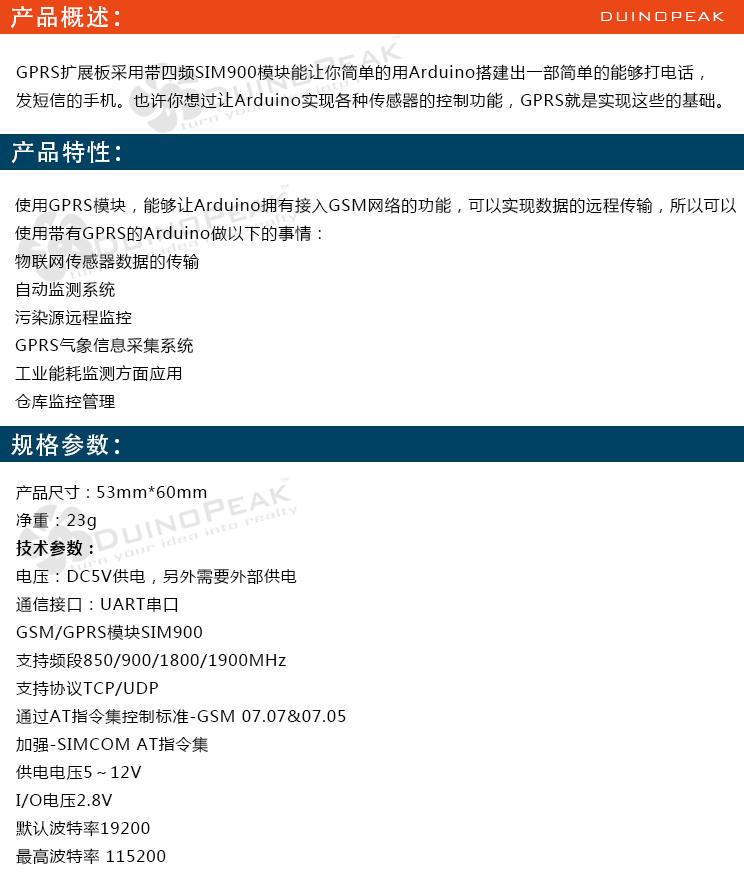
<style>
.page{position:relative;width:744px;height:880px;background:#ffffff}
.page>*{position:absolute;margin:0}
.t1{font:24px "AdobeHeitiStd-Regular";letter-spacing:0.05em;color:#ffffff}
.t2{font:18px "BankGothicBT-Light";letter-spacing:0.05em;color:#ffffff}
.t3{font:16px "MicrosoftYaHei";letter-spacing:0.05em;color:#000000}
.t4{font:16px "MicrosoftYaHei";color:#000000}
.t5{font:16px "MicrosoftYaHei-Bold";letter-spacing:0.05em;color:#000000}
</style>
<div class="page">
<p class="t1" style="left:10px;top:6px;width:109px;height:23px">产品概述：</p>
<p class="t2" style="left:601px;top:12px;width:124px;height:9px">DUINOPEAK</p>
<p class="t3" style="left:16px;top:64px;width:705px;height:45px">GPRS扩展板采用带四频SIM900模块能让你简单的用Arduino搭建出一部简单的能够打电话，<br>发短信的手机。也许你想过让Arduino实现各种传感器的控制功能，GPRS就是实现这些的基础。</p>
<p class="t1" style="left:11px;top:140px;width:109px;height:24px">产品特性：</p>
<p class="t3" style="left:15px;top:197px;width:722px;height:213px">使用GPRS模块，能够让Arduino拥有接入GSM网络的功能，可以实现数据的远程传输，所以可以<br>使用带有GPRS的Arduino做以下的事情：<br>物联网传感器数据的传输<br>自动监测系统<br>污染源远程监控<br>GPRS气象信息采集系统<br>工业能耗监测方面应用<br>仓库监控管理</p>
<p class="t1" style="left:11px;top:433px;width:108px;height:23px">规格参数：</p>
<p class="t3" style="left:16px;top:485px;width:330px;height:380px"><span class="t4">产品尺寸：</span>53mm*60mm<br>净重：23g<br><span class="t5">技术参数：<br></span>电压：DC5V供电，另外需要外部供电<br>通信接口：UART串口<br>GSM/GPRS模块SIM900<br>支持频段850/900/1800/1900MHz<br>支持协议TCP/UDP<br>通过AT指令集控制标准-GSM 07.07&amp;07.05<br>加强-SIMCOM AT指令集<br>供电电压5～12V<br>I/O电压2.8V<br>默认波特率19200<br>最高波特率 115200</p>
</div>
